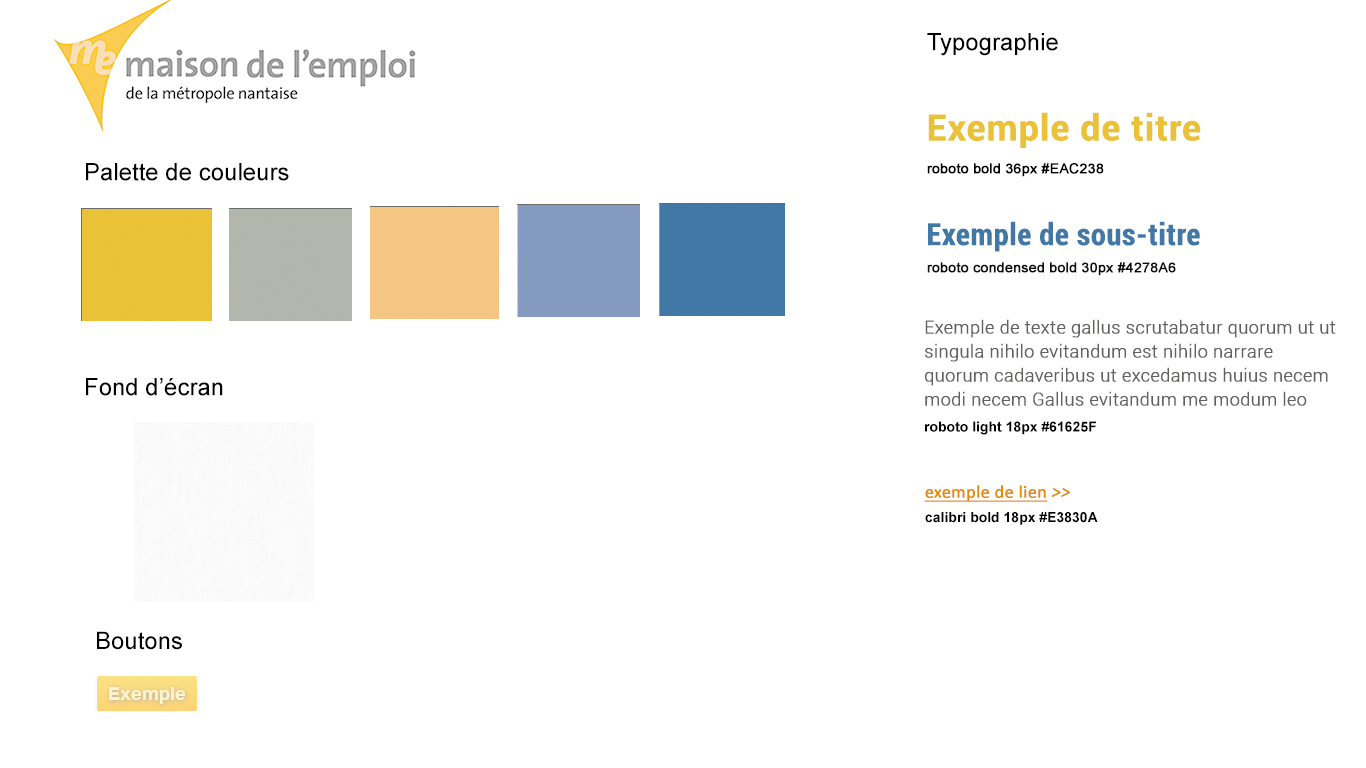
<style>
.page{position:relative;width:1366px;height:768px;background:#ffffff}
.page>*{position:absolute;margin:0}
.t1{font:24px "ArialMT";color:#000000}
.t2{font:36px "Roboto-Bold";color:#eac238;font-weight:bold}
.t3{font:14px "ArialMT";color:#000000;font-weight:bold}
.t4{font:30px "Roboto-BoldCondensed";color:#4278a6;font-weight:bold}
.t5{font:14px "ArialMT";color:#0d0d0d;font-weight:bold}
.t6{font:18px/24px "Roboto-Light";color:#61625f;font-weight:bold}
.t7{font:14px "Arial-BoldMT";color:#000000}
.t8{font:18px "Calibri";color:#e38a0a;font-weight:bold;text-decoration:underline}
.t9{font:18px "Calibri-Italic";color:#e38a0a;font-weight:bold}
</style>
<div class="page">
<p class="t1" style="left:927px;top:33px;width:131px;height:23px">Typographie</p>
<p class="t2" style="left:928px;top:112px;width:273px;height:36px">Exemple de titre</p>
<p class="t1" style="left:86px;top:163px;width:203px;height:18px">Palette de couleurs</p>
<p class="t3" style="left:927px;top:163px;width:177px;height:14px">roboto bold 36px #EAC238</p>
<p class="t4" style="left:928px;top:221px;width:272px;height:31px">Exemple de sous-titre</p>
<p class="t5" style="left:927px;top:262px;width:249px;height:14px">roboto condensed bold 30px #4278A6</p>
<p class="t6" style="left:925px;top:319px;width:411px;height:87px">Exemple de texte gallus scrutabatur quorum ut ut singula nihilo evitandum est nihilo narrare quorum cadaveribus ut excedamus huius necem modi necem Gallus evitandum me modum leo pastus professione leo</p>
<p class="t1" style="left:86px;top:378px;width:137px;height:18px">Fond d’écran</p>
<p class="t7" style="left:925px;top:421px;width:171px;height:14px">roboto light 18px #61625F</p>
<p class="t8" style="left:924px;top:485px;width:146px;height:17px">exemple de lien <span class="t9">&gt;&gt;</span></p>
<p class="t7" style="left:925px;top:512px;width:173px;height:13px">calibri bold 18px #E3830A</p>
<p class="t1" style="left:97px;top:631px;width:85px;height:19px">Boutons</p>
</div>
